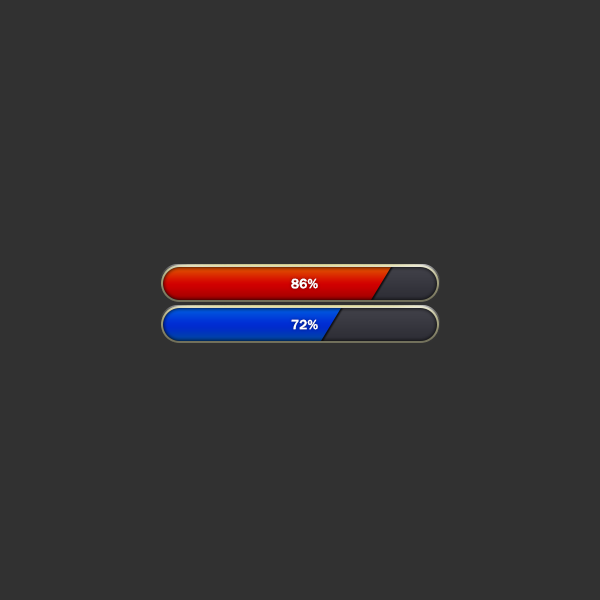
<style>
.page{position:relative;width:600px;height:600px;background:#313131}
.page>*{position:absolute;margin:0}
.t1{font:14px "FranklinGothic-Medium";color:#ffffff}
</style>
<div class="page">
<p class="t1" style="left:291px;top:278px;width:27px;height:11px">86%</p>
<p class="t1" style="left:291px;top:319px;width:27px;height:11px">72%</p>
</div>
